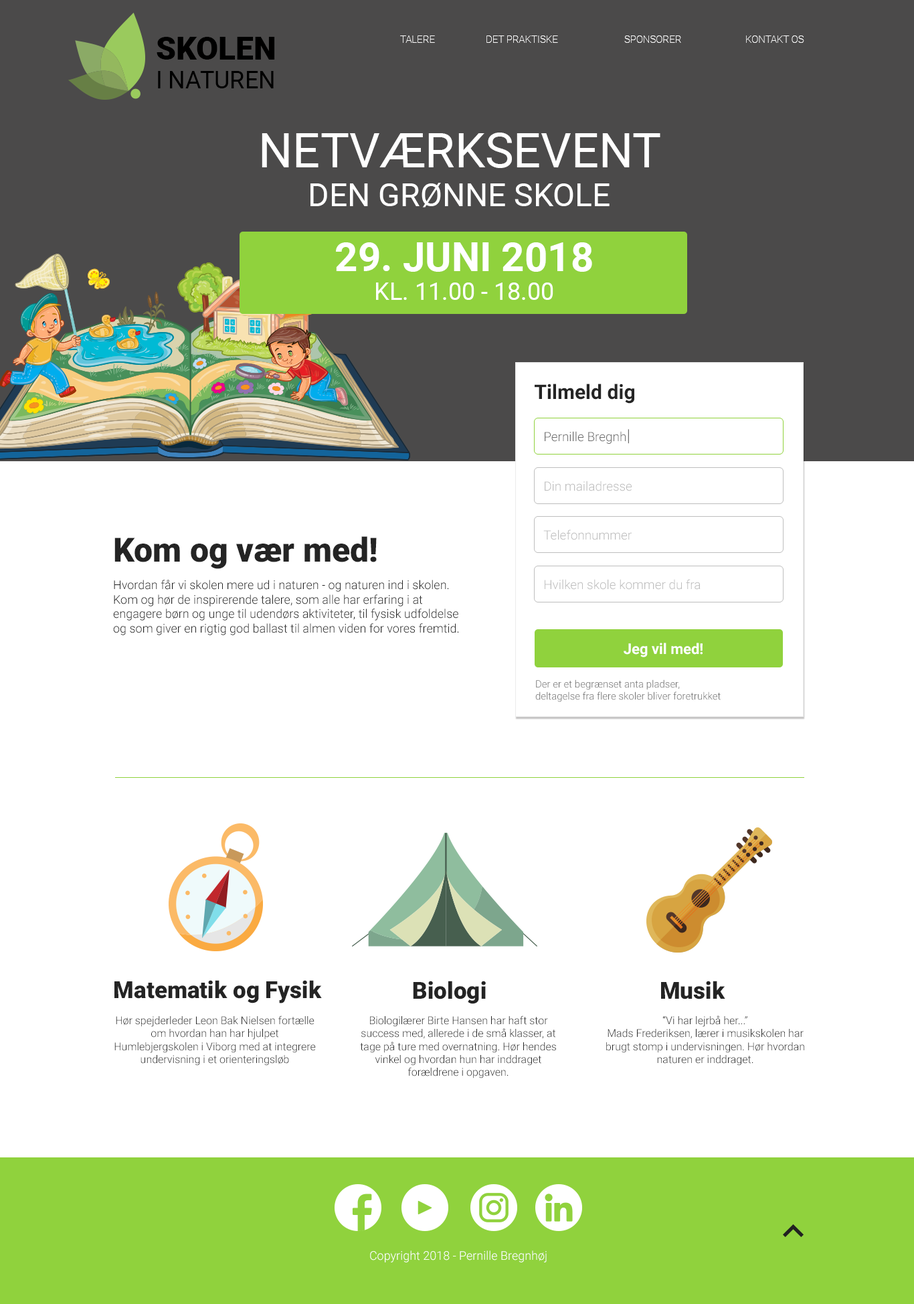
<style>
.page{position:relative;width:914px;height:1304px;background:#ffffff}
.page>*{position:absolute;margin:0}
.t1{font:24.1px "Roboto-Regular";color:#000000;text-transform:uppercase}
.t2{font:32.1px "Roboto-Black";color:#000000;text-transform:uppercase}
.t3{font:10px "Roboto-Thin";color:#ffffff;text-transform:uppercase}
.t4{font:32.1px "Roboto-Regular";color:#ffffff;text-transform:uppercase}
.t5{font:48.2px "Roboto-Regular";color:#ffffff;text-transform:uppercase}
.t6{font:24.1px "Roboto-Regular";color:#ffffff;text-transform:uppercase}
.t7{font:40.2px "Roboto-Bold";color:#ffffff;text-transform:uppercase}
.t8{font:20.1px "Roboto-Bold";color:#252525}
.t9{font:12.7px "Roboto-Light";color:#6c6c6c}
.t10{font:16.7px "Roboto-Light";color:#6c6c6c}
.t11{font:12.7px "Roboto-Light";color:#bebebe}
.t12{font:33.5px "Roboto-Black";color:#242424}
.t13{font:12px "Roboto-Light";color:#242424}
.t14{font:14.7px "Roboto-Bold";color:#ffffff}
.t15{font:10px "Roboto-Light";color:#6c6c6c}
.t16{font:23.4px "Roboto-Black";color:#242424}
.t17{font:10.7px "Roboto-Light";color:#242424}
.t18{font:12px "Roboto-Light";color:#ffffff}
</style>
<div class="page">
<p class="t1" style="left:157px;top:37px;width:118px;height:51px"><span class="t2">SKOLEN<br></span>I NATUREN</p>
<p class="t3" style="left:400px;top:35px;width:35px;height:8px">Talere</p>
<p class="t3" style="left:487px;top:35px;width:71px;height:8px">Det praktiske</p>
<p class="t3" style="left:625px;top:35px;width:56px;height:8px">sponsorer</p>
<p class="t3" style="left:746px;top:35px;width:59px;height:8px">kontakt os</p>
<p class="t4" style="left:262px;top:133px;width:399px;height:75px;text-align:center"><span class="t5">Netværksevent <br></span>den grønne skole</p>
<p class="t6" style="left:336px;top:242px;width:256px;height:58px;text-align:center"><span class="t7">29. Juni 2018<br></span>KL. 11.00 - 18.00</p>
<p class="t8" style="left:535px;top:384px;width:100px;height:20px">Tilmeld dig</p>
<p class="t9" style="left:545px;top:429px;width:84px;height:15px">Pernille Bregnh<span class="t10">|</span></p>
<p class="t11" style="left:545px;top:481px;width:87px;height:10px">Din mailadresse</p>
<p class="t11" style="left:544px;top:530px;width:88px;height:10px">Telefonnummer</p>
<p class="t12" style="left:114px;top:536px;width:263px;height:33px">Kom og vær med!</p>
<p class="t13" style="left:113px;top:580px;width:346px;height:55px">Hvordan får vi skolen mere ud i naturen - og naturen ind i skolen. Kom og hør de inspirerende talere, som alle har erfaring i at engagere børn og unge til udendørs aktiviteter, til fysisk udfoldelse og som giver en rigtig god ballast til almen viden for vores fremtid.</p>
<p class="t11" style="left:545px;top:579px;width:156px;height:11px">Hvilken skole kommer du fra</p>
<p class="t14" style="left:624px;top:643px;width:79px;height:14px">Jeg vil med!</p>
<p class="t15" style="left:536px;top:679px;width:185px;height:23px">Der er et begrænset anta pladser,<br>deltagelse fra flere skoler bliver foretrukket</p>
<p class="t16" style="left:114px;top:980px;width:208px;height:23px">Matematik og Fysik</p>
<p class="t16" style="left:413px;top:981px;width:73px;height:23px">Biologi</p>
<p class="t16" style="left:661px;top:981px;width:65px;height:18px">Musik</p>
<p class="t17" style="left:114px;top:1016px;width:202px;height:50px;text-align:center">Hør spejderleder Leon Bak Nielsen fortælle om hvordan han har hjulpet Humlebjergskolen i Viborg med at integrere undervisning i et orienteringsløb</p>
<p class="t17" style="left:360px;top:1016px;width:196px;height:62px;text-align:center">Biologilærer Birte Hansen har haft stor success med, allerede i de små klasser, at tage på ture med overnatning. Hør hendes vinkel og hvordan hun har inddraget forældrene i opgaven.</p>
<p class="t17" style="left:606px;top:1016px;width:199px;height:50px;text-align:center">“Vi har lejrbå her...”<br>Mads Frederiksen, lærer i musikskolen har brugt stomp i undervisningen. Hør hvordan naturen er inddraget.</p>
<p class="t18" style="left:370px;top:1250px;width:177px;height:13px">Copyright 2018 - Pernille Bregnhøj</p>
</div>
